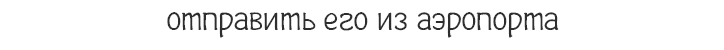
<style>
.page{position:relative;width:724px;height:50px;background:#ffffff}
.page>*{position:absolute;margin:0}
.t1{font:35px "Plainot";color:#2e2e2e}
</style>
<div class="page">
<p class="t1" style="left:167px;top:12px;width:392px;height:26px">отправить его из аэропорта</p>
</div>
